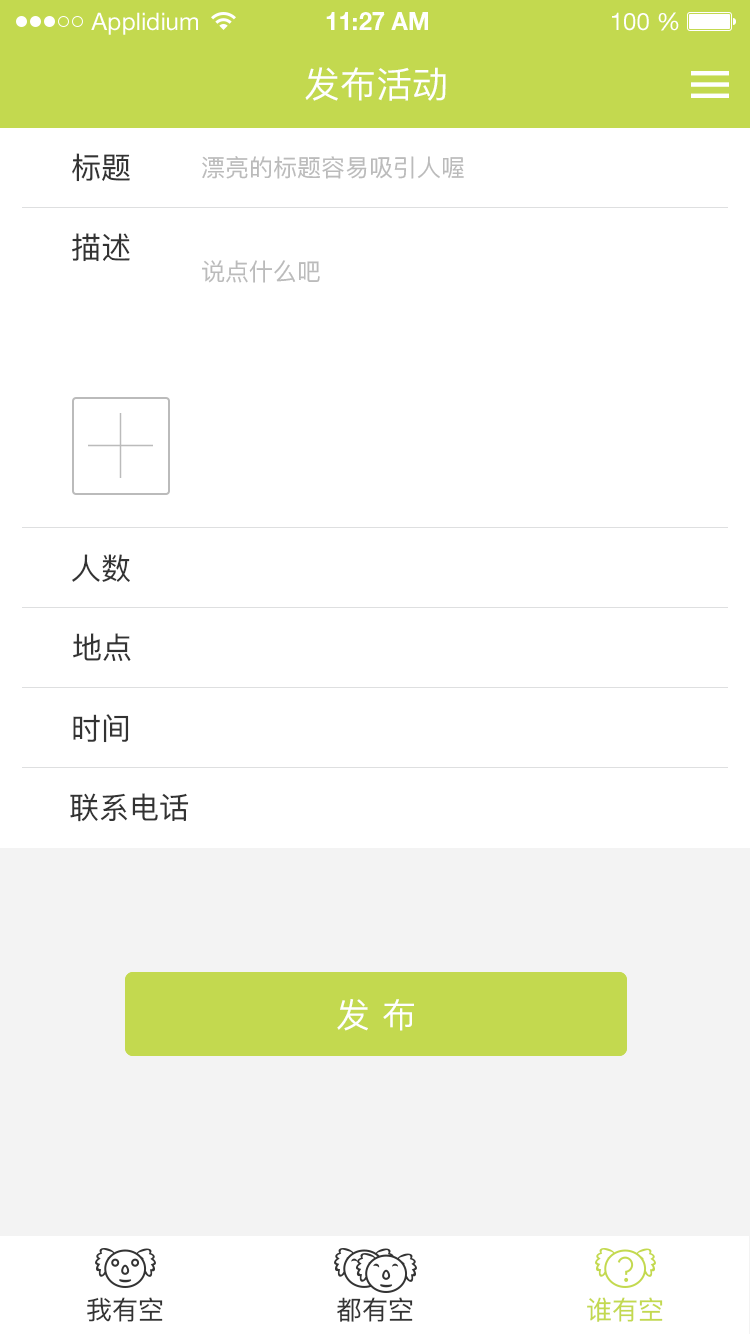
<style>
.page{position:relative;width:750px;height:1334px;background:#ffffff}
.page>*{position:absolute;margin:0}
.t1{font:24px "HelveticaNeueLTStd-Roman";color:#ffffff}
.t2{font:24px "HelveticaNeueLTStd-Bd";color:#ffffff}
.t3{font:36px "PingFangSC-Regular";color:#ffffff}
.t4{font:30px "PingFangSC-Regular";color:#333333}
.t5{font:24px "PingFangSC-Regular";color:#bbbbbb}
.t6{font:34px "PingFangSC-Regular";color:#ffffff}
.t7{font:26px "PingFangSC-Regular";color:#333333}
.t8{font:26px "PingFangSC-Regular";color:#c3d94f}
</style>
<div class="page">
<p class="t1" style="left:91px;top:12px;width:107px;height:23px">Applidium</p>
<p class="t2" style="left:326px;top:12px;width:102px;height:18px">11:27 AM</p>
<p class="t1" style="left:612px;top:12px;width:67px;height:19px">100 %</p>
<p class="t3" style="left:305px;top:67px;width:141px;height:34px">发布活动</p>
<p class="t4" style="left:72px;top:153px;width:58px;height:29px">标题</p>
<p class="t5" style="left:202px;top:156px;width:262px;height:23px">漂亮的标题容易吸引人喔</p>
<p class="t4" style="left:72px;top:233px;width:58px;height:29px">描述</p>
<p class="t5" style="left:202px;top:260px;width:118px;height:23px">说点什么吧</p>
<p class="t4" style="left:72px;top:554px;width:58px;height:28px">人数</p>
<p class="t4" style="left:73px;top:633px;width:58px;height:28px">地点</p>
<p class="t4" style="left:73px;top:714px;width:56px;height:29px">时间</p>
<p class="t4" style="left:70px;top:793px;width:119px;height:29px">联系电话</p>
<p class="t6" style="left:337px;top:999px;width:77px;height:32px">发 布</p>
<p class="t7" style="left:87px;top:1297px;width:76px;height:25px">我有空</p>
<p class="t7" style="left:337px;top:1297px;width:76px;height:25px">都有空</p>
<p class="t8" style="left:587px;top:1297px;width:76px;height:25px">谁有空</p>
</div>
